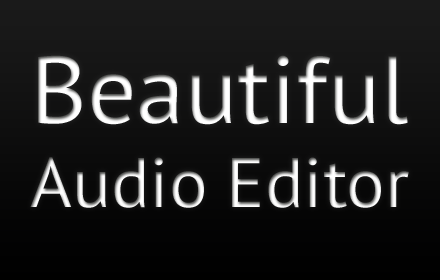
<style>
.page{position:relative;width:440px;height:280px}
.page>*{position:absolute;margin:0}
.t1{font:70px "PTSans-Regular"}
.t2{font:95px "PTSans-Regular"}
</style>
<div class="page">
<p class="t1" style="left:30px;top:55px;width:379px;height:153px"><span class="t2">Beautiful <br></span>Audio Editor</p>
</div>
